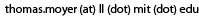
<style>
.page{position:relative;width:199px;height:17px;background:#ffffff}
.page>*{position:absolute;margin:0}
.t1{font:12px "MyriadPro-Regular";color:#000000}
</style>
<div class="page">
<p class="t1" style="left:5px;top:4px;width:194px;height:12px">thomas.moyer (at) ll (dot) mit (dot) edu</p>
</div>
